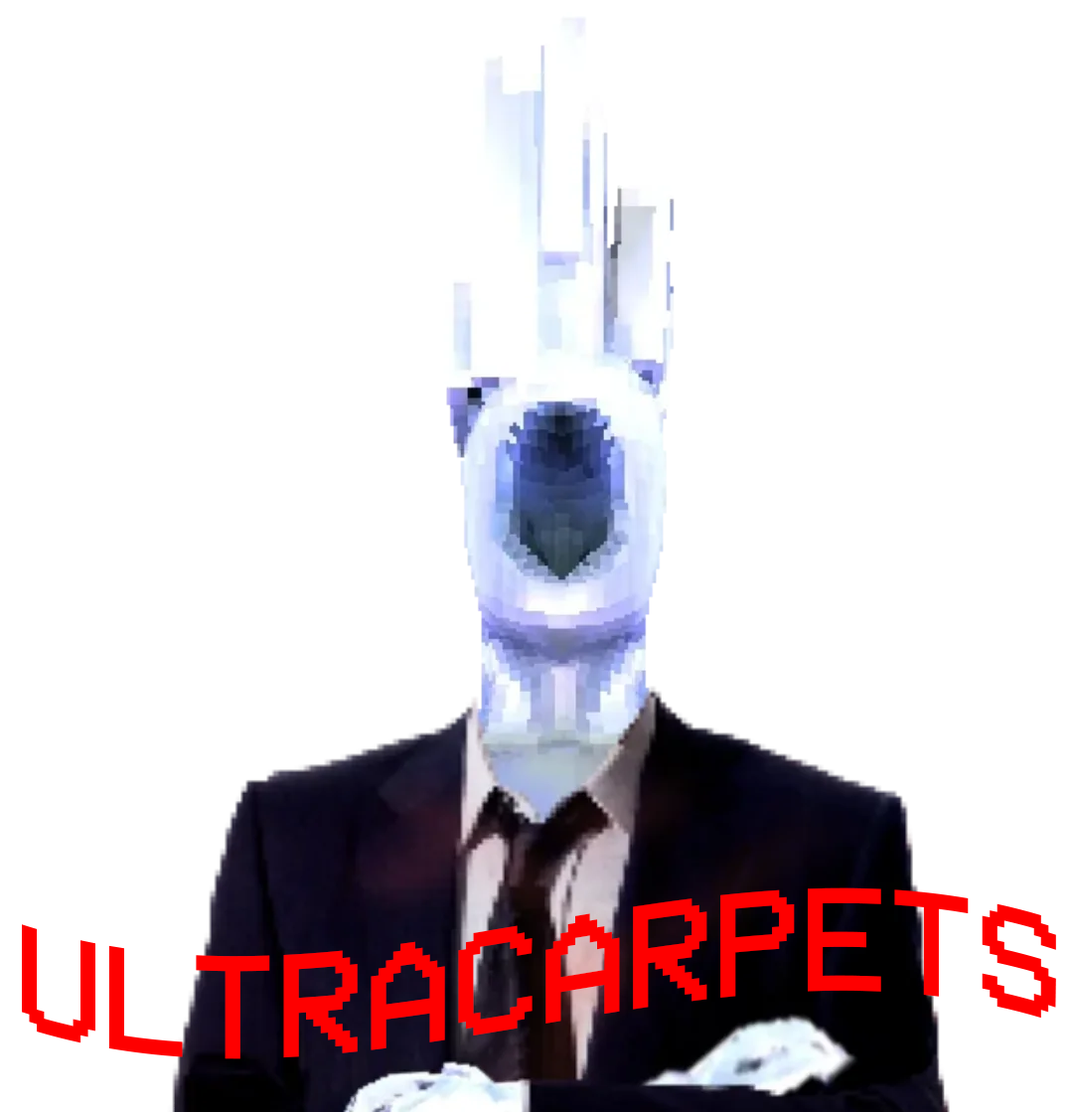
<style>
.page{position:relative;width:1073px;height:1112px;background:#ffffff}
.page>*{position:absolute;margin:0}
.t1{font:149px "VCROSDMono";color:#fe0000}
</style>
<div class="page">
<p class="t1" style="left:22px;top:887px;width:1034px;height:172px">ULTRACARPETS</p>
</div>
